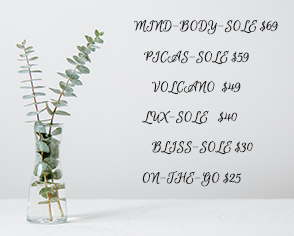
<style>
.page{position:relative;width:294px;height:236px}
.page>*{position:absolute;margin:0}
.t1{font:16px "EuphoriaScript-Regular";color:#181818}
</style>
<div class="page">
<p class="t1" style="left:134px;top:19px;width:144px;height:16px">MIND-BODY-SOLE $69</p>
<p class="t1" style="left:143px;top:50px;width:106px;height:15px">PICAS-SOLE $59</p>
<p class="t1" style="left:151px;top:80px;width:90px;height:15px">VOLCANO  $49</p>
<p class="t1" style="left:142px;top:110px;width:95px;height:15px">LUX-SOLE   $40</p>
<p class="t1" style="left:151px;top:140px;width:102px;height:15px">BLISS-SOLE $30</p>
<p class="t1" style="left:142px;top:170px;width:99px;height:17px">ON-THE-GO $25</p>
</div>
